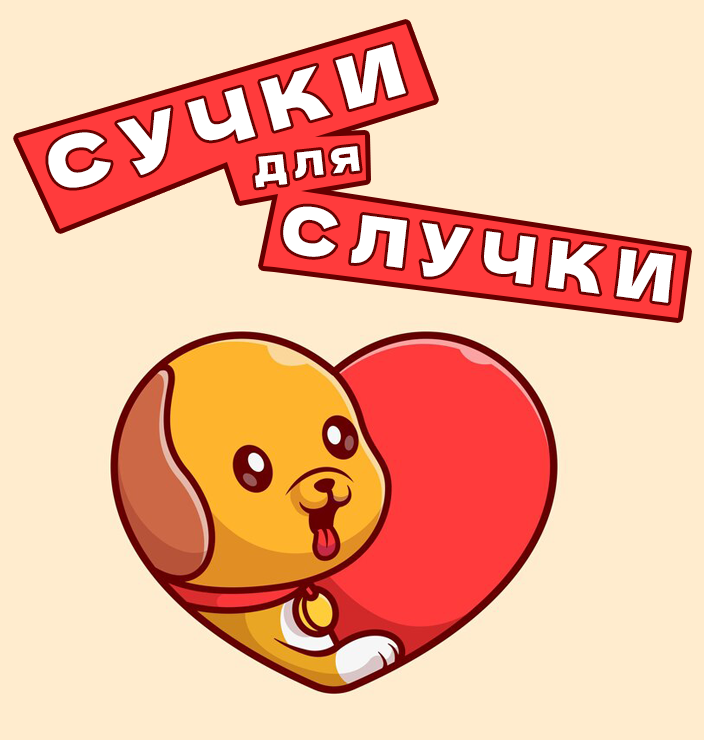
<style>
.page{position:relative;width:704px;height:740px;background:#ffecce}
.page>*{position:absolute;margin:0}
.t1{font:100px "DelaGothicOne-Regular";letter-spacing:0.2em;color:#ffffff;font-variant:small-caps}
.t2{font:48px "DelaGothicOne-Regular";letter-spacing:0.2em;color:#ffffff;font-variant:small-caps}
.t3{font:93.3px "DelaGothicOne-Regular";letter-spacing:0.2em;color:#ffffff;font-variant:small-caps;scale:0.95 1}
</style>
<div class="page">
<p class="t1" style="left:48px;top:44px;width:358px;height:144px;rotate:-16deg">сучки</p>
<p class="t2" style="left:255px;top:146px;width:105px;height:42px;rotate:-6deg">для</p>
<p class="t3" style="left:283px;top:206px;width:391px;height:97px;rotate:7deg">случки</p>
</div>
